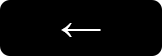
<style>
.page{position:relative;width:162px;height:56px;background:#000000}
.page>*{position:absolute;margin:0}
.t1{font:40.5px "TimesNewRomanPSMT";color:#ffffff}
</style>
<div class="page">
<p class="t1" style="left:61px;top:23px;width:40px;height:14px">←</p>
</div>
